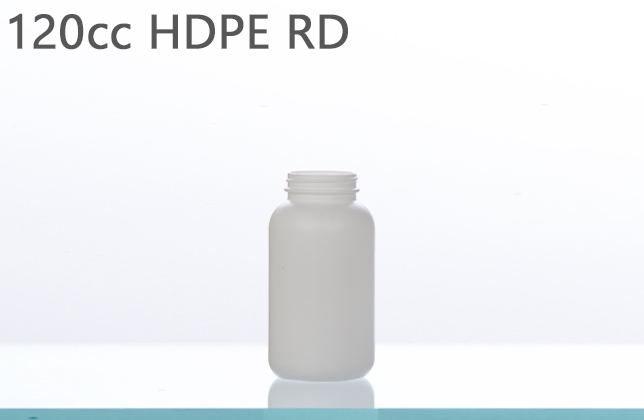
<style>
.page{position:relative;width:644px;height:420px}
.page>*{position:absolute;margin:0}
.t1{font:48px "Gadugi";color:#575757;font-weight:bold}
</style>
<div class="page">
<p class="t1" style="left:9px;top:13px;width:339px;height:37px">120cc HDPE RD</p>
</div>
